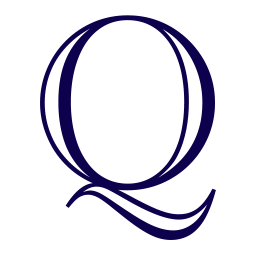
<style>
.page{position:relative;width:256px;height:256px;background:#ffffff}
.page>*{position:absolute;margin:0}
.t1{font:250px "AcademyEngravedLetPlain";color:#0d004c}
</style>
<div class="page">
<p class="t1" style="left:40px;top:15px;width:176px;height:225px">Q</p>
</div>
